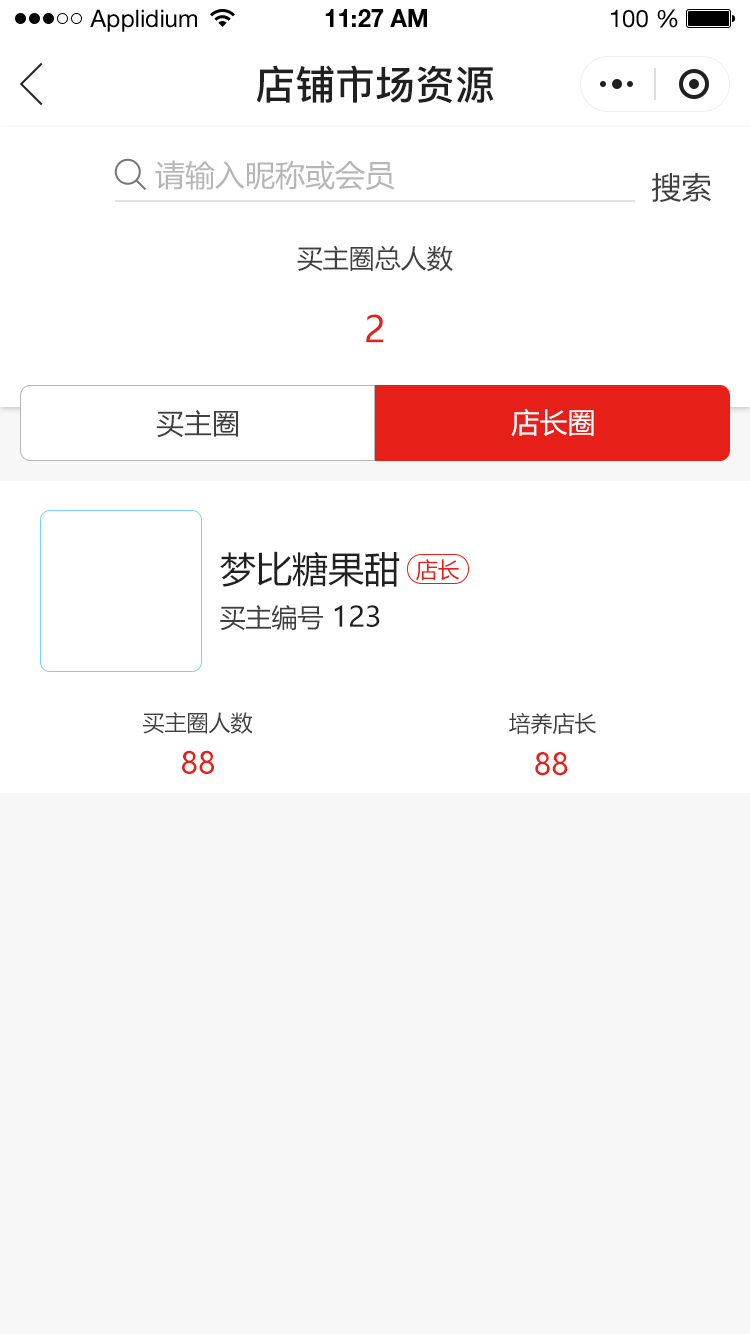
<style>
.page{position:relative;width:750px;height:1334px;background:#ffffff}
.page>*{position:absolute;margin:0}
.t1{font:24px "HelveticaNeueLTStd-Roman";color:#000000}
.t2{font:24px "HelveticaNeueLTStd-Bd";color:#000000}
.t3{font:40px "PingFang-SC-Bold";color:#202020;text-transform:uppercase}
.t4{font:30px "MicrosoftYaHei";color:#b6b6b6;text-transform:uppercase}
.t5{font:30px "MicrosoftYaHei";color:#404040;text-transform:uppercase}
.t6{font:26px "MicrosoftYaHei";color:#404040;text-transform:uppercase}
.t7{font:36px "MicrosoftYaHei";color:#e61f18;text-transform:uppercase}
.t8{font:28px "MicrosoftYaHei";color:#404040;text-transform:uppercase}
.t9{font:28px "MicrosoftYaHei";color:#ffffff;text-transform:uppercase}
.t10{font:36px "MicrosoftYaHei";color:#202020;text-transform:uppercase}
.t11{font:22px "MicrosoftYaHei";color:#e61f18;text-transform:uppercase}
.t12{font:28px "MicrosoftYaHei";color:#202020;text-transform:uppercase}
.t13{font:22px "MicrosoftYaHei";color:#404040;text-transform:uppercase}
.t14{font:30px "MicrosoftYaHei";color:#e61f18;text-transform:uppercase}
</style>
<div class="page">
<p class="t1" style="left:90px;top:9px;width:107px;height:23px">Applidium</p>
<p class="t2" style="left:325px;top:9px;width:102px;height:18px">11:27 AM</p>
<p class="t1" style="left:611px;top:9px;width:67px;height:19px">100 %</p>
<p class="t3" style="left:256px;top:65px;width:238px;height:39px">店铺市场资源</p>
<p class="t4" style="left:155px;top:160px;width:240px;height:30px">请输入昵称或会员</p>
<p class="t5" style="left:652px;top:173px;width:59px;height:29px">搜索</p>
<p class="t6" style="left:297px;top:245px;width:156px;height:27px">买主圈总人数</p>
<p class="t7" style="left:366px;top:314px;width:18px;height:29px">2</p>
<p class="t8" style="left:156px;top:410px;width:82px;height:28px">买主圈</p>
<p class="t9" style="left:511px;top:408px;width:83px;height:29px">店长圈</p>
<p class="t10" style="left:220px;top:551px;width:180px;height:36px">梦比糖果甜</p>
<p class="t11" style="left:416px;top:559px;width:44px;height:22px">店长</p>
<p class="t6" style="left:220px;top:605px;width:160px;height:26px">买主编号 <span class="t12">123</span></p>
<p class="t13" style="left:143px;top:712px;width:110px;height:22px">买主圈人数</p>
<p class="t13" style="left:509px;top:712px;width:87px;height:23px">培养店长</p>
<p class="t14" style="left:182px;top:750px;width:32px;height:24px">88</p>
<p class="t14" style="left:535px;top:752px;width:33px;height:24px">88</p>
</div>
